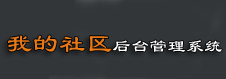
<style>
.page{position:relative;width:226px;height:79px;background:#323639}
.page>*{position:absolute;margin:0}
.t1{font:18px "LiSu";letter-spacing:0.02em;color:#fefefe}
.t2{font:26px "LiSu";letter-spacing:0.02em;color:#e87916}
</style>
<div class="page">
<p class="t1" style="left:8px;top:35px;width:214px;height:18px"><span class="t2">我的社区</span>后台管理系统</p>
</div>
